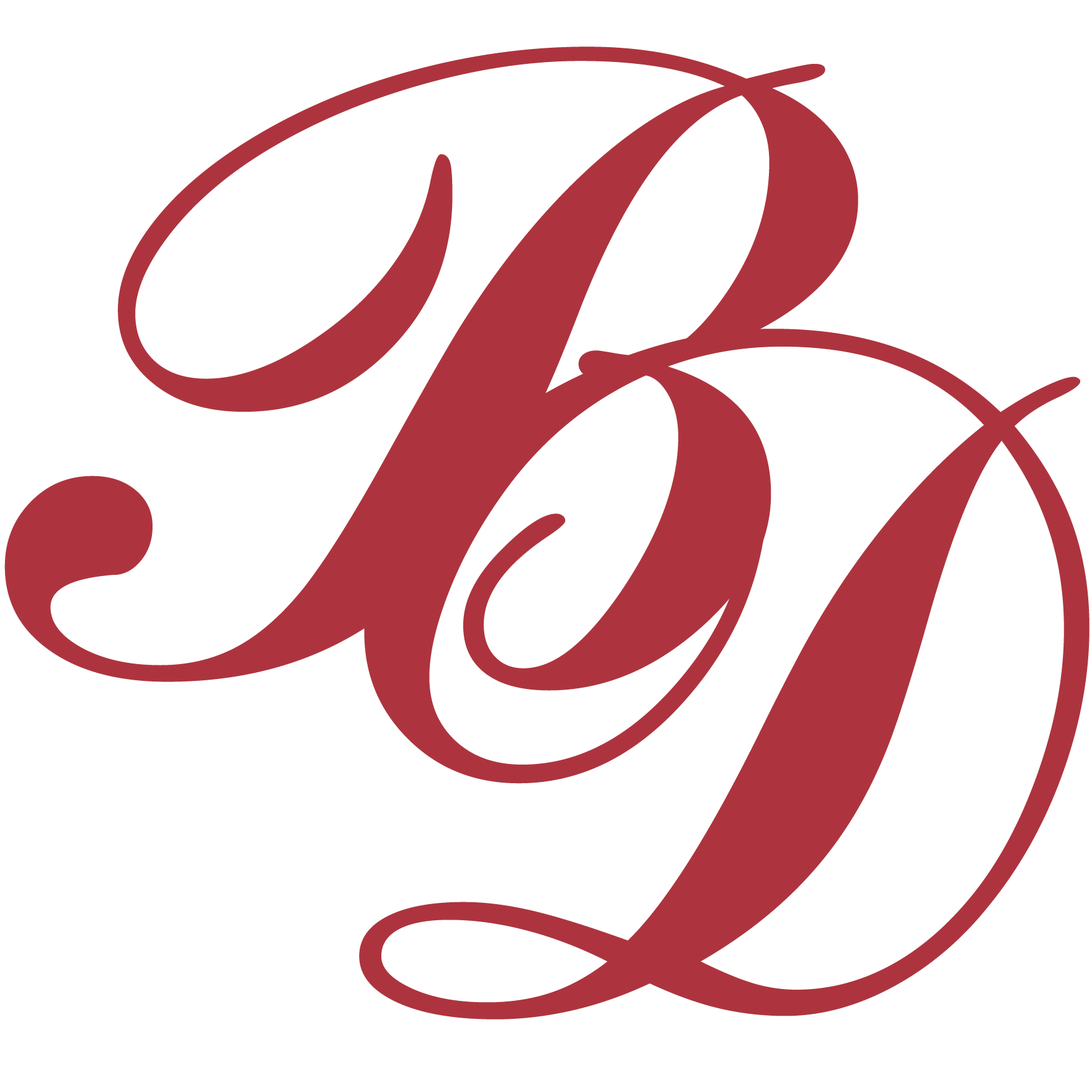
<style>
.page{position:relative;width:1092px;height:1092px;background:#ffffff}
.page>*{position:absolute;margin:0}
.t1{font:1017.1px "CommercialScriptBT-Regular";color:#ad343e}
.t2{font:1092.5px "CommercialScriptBT-Regular";color:#ad343e}
</style>
<div class="page">
<p class="t1" style="left:4px;top:47px;width:854px;height:644px">B</p>
<p class="t2" style="left:359px;top:329px;width:731px;height:690px">D</p>
</div>
